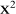
<style>
.page{position:relative;width:16px;height:14px;background:#ffffff}
.page>*{position:absolute;margin:0}
.t1{font:18px "TimesNewRomanPSMT";color:#000000;scale:1.1 1}
</style>
<div class="page">
<p class="t1" style="left:0px;top:0px;width:16px;height:14px">x2</p>
</div>
